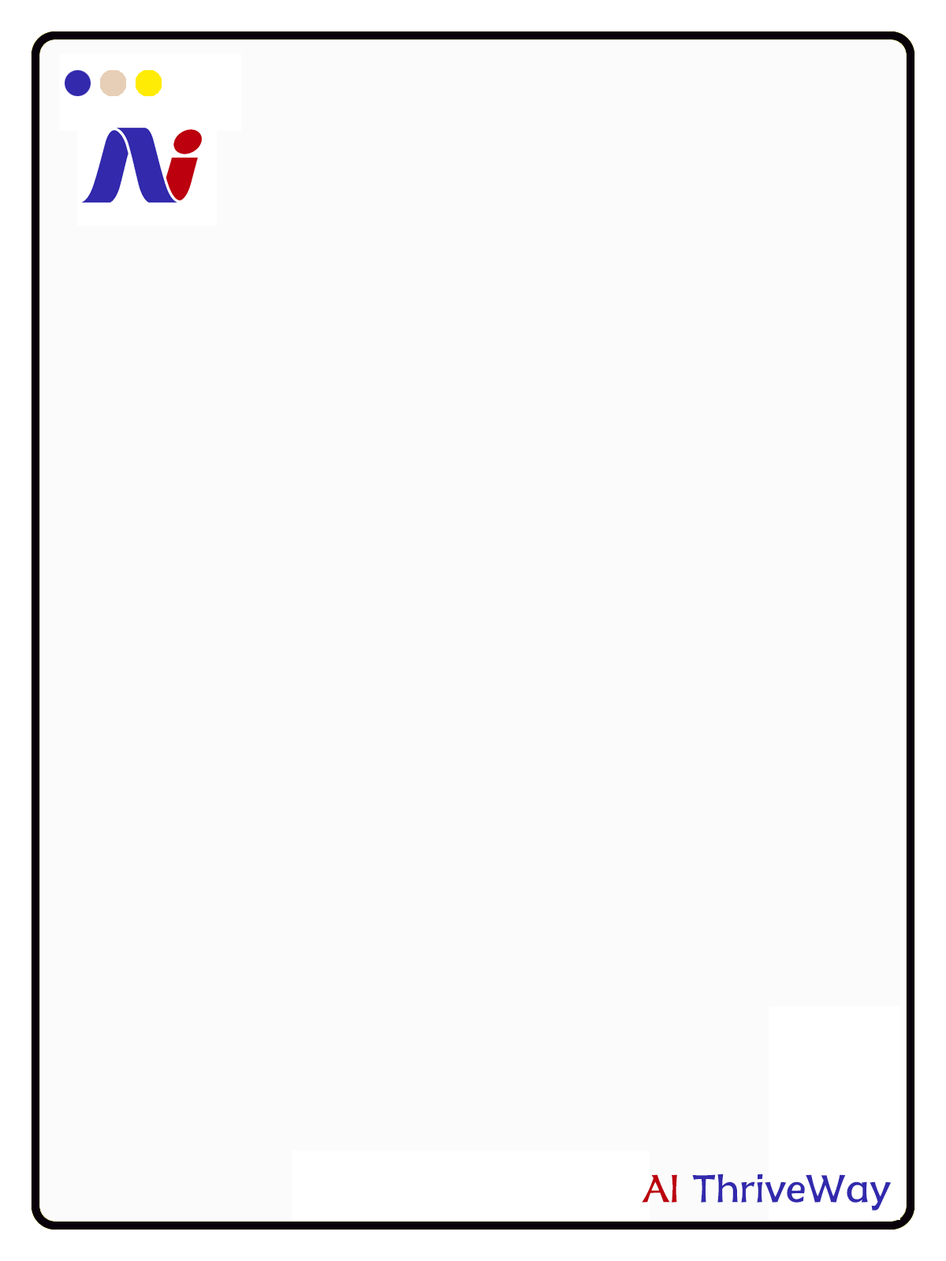
<style>
.page{position:relative;width:946px;height:1261px;background:#fbfbfb}
.page>*{position:absolute;margin:0}
.t1{font:42.6px "AlimamaDaoLiTi";color:#3229ad}
.t2{font:42.6px "AlimamaDaoLiTi";color:#bc000e}
</style>
<div class="page">
<p class="t1" style="left:641px;top:1173px;width:250px;height:37px"><span class="t2">AI </span>ThriveWay</p>
</div>
